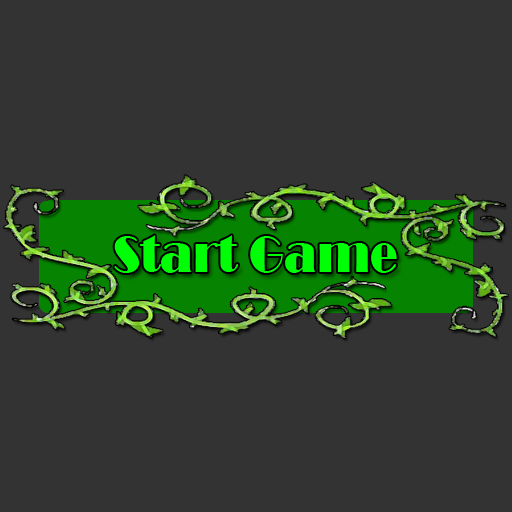
<style>
.page{position:relative;width:512px;height:512px;background:#333333}
.page>*{position:absolute;margin:0}
.t1{font:52.1px "Broadway";color:#00ff06;scale:0.89 1}
</style>
<div class="page">
<p class="t1" style="left:114px;top:235px;width:283px;height:38px">Start Game</p>
</div>
